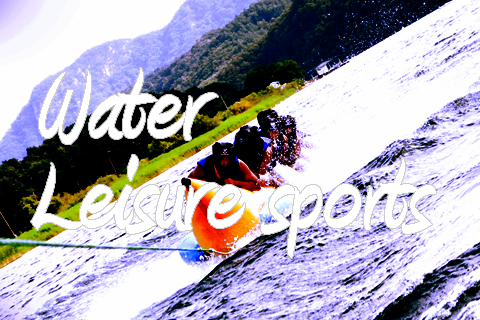
<style>
.page{position:relative;width:480px;height:320px;background:#fefefe}
.page>*{position:absolute;margin:0}
.t1{font:128px "Amienne-Bold";color:#ffffff}
</style>
<div class="page">
<p class="t1" style="left:39px;top:68px;width:179px;height:76px">Water</p>
<p class="t1" style="left:31px;top:155px;width:405px;height:103px">Leisure sports</p>
</div>
